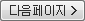
<style>
.page{position:relative;width:85px;height:21px}
.page>*{position:absolute;margin:0}
.t1{font:12px "Gulim";letter-spacing:-0.03em;color:#2c2c2c}
.t2{font:12px "Gulim";letter-spacing:-0.03em;color:#2c2c2c;font-weight:bold}
</style>
<div class="page">
<p class="t1" style="left:10px;top:5px;width:67px;height:11px">다음페이지 <span class="t2">&gt;</span></p>
</div>
